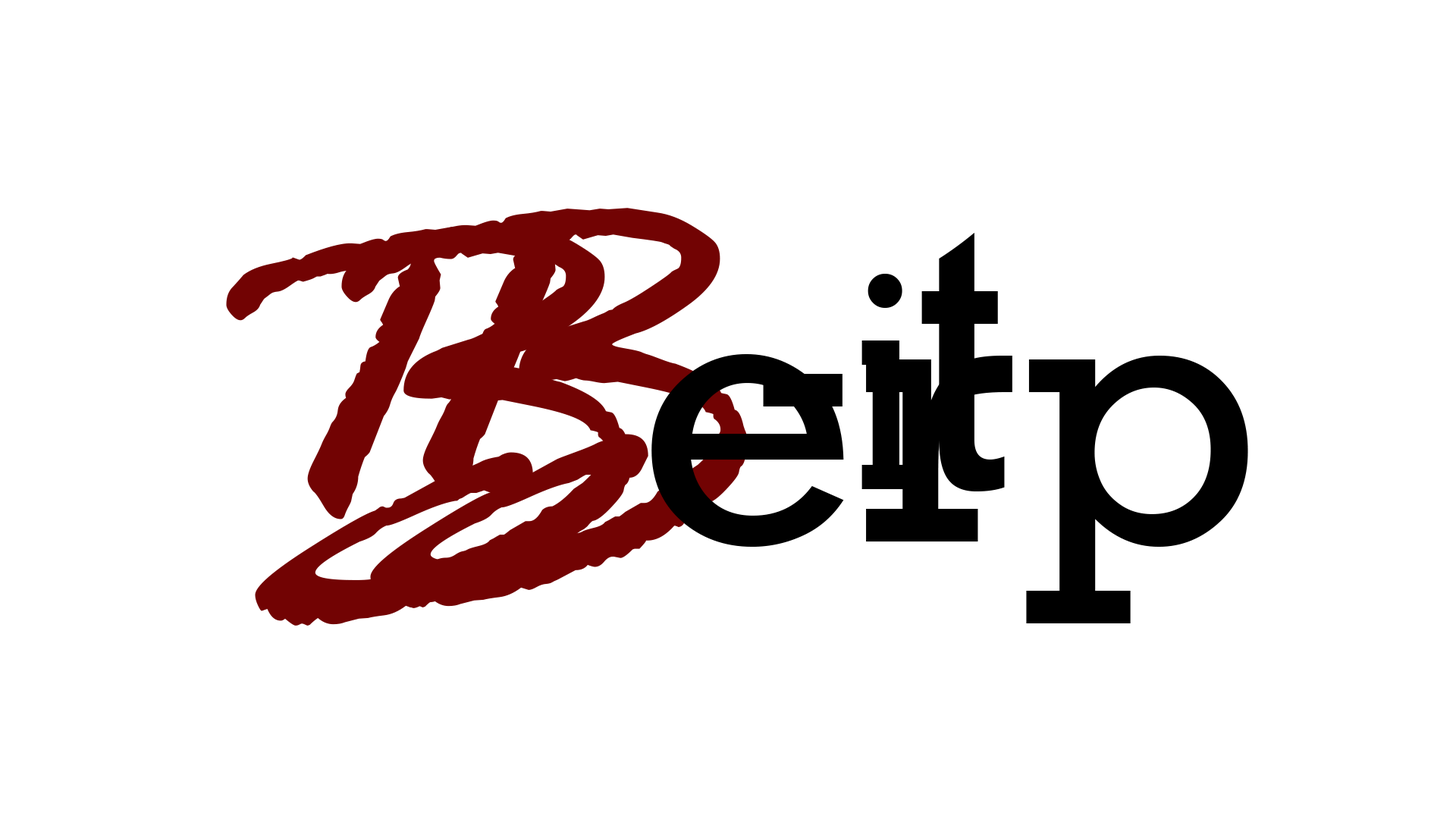
<style>
.page{position:relative;width:1456px;height:819px;background:#ffffff}
.page>*{position:absolute;margin:0}
.t1{font:674.1px "RageItalic";color:#720303}
.t2{font:385.2px "Rockwell-Condensed";color:#000000}
.t3{font:288.9px "Rockwell-Condensed";color:#000000}
.t4{font:385.2px "Rockwell";color:#000000}
</style>
<div class="page">
<p class="t1" style="left:341px;top:208px;width:406px;height:399px">B</p>
<p class="t1" style="left:226px;top:226px;width:406px;height:400px">B</p>
<p class="t2" style="left:763px;top:233px;width:242px;height:258px">-<span class="t3">i</span>t</p>
<p class="t4" style="left:651px;top:354px;width:597px;height:269px">erp</p>
</div>
